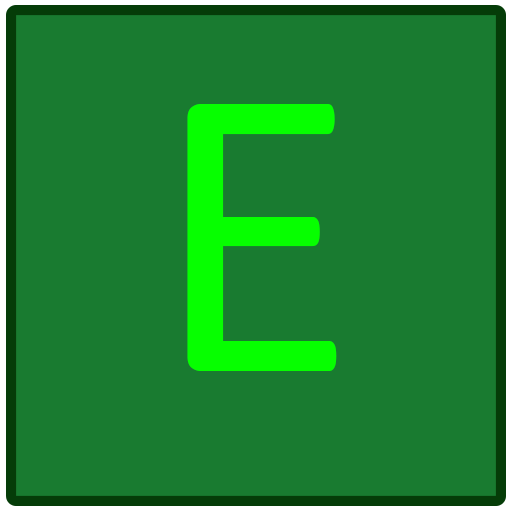
<style>
.page{position:relative;width:512px;height:512px;background:#197b30}
.page>*{position:absolute;margin:0}
.t1{font:423.3px "Calibri";color:#06ff00}
</style>
<div class="page">
<p class="t1" style="left:187px;top:104px;width:150px;height:267px">E</p>
</div>
